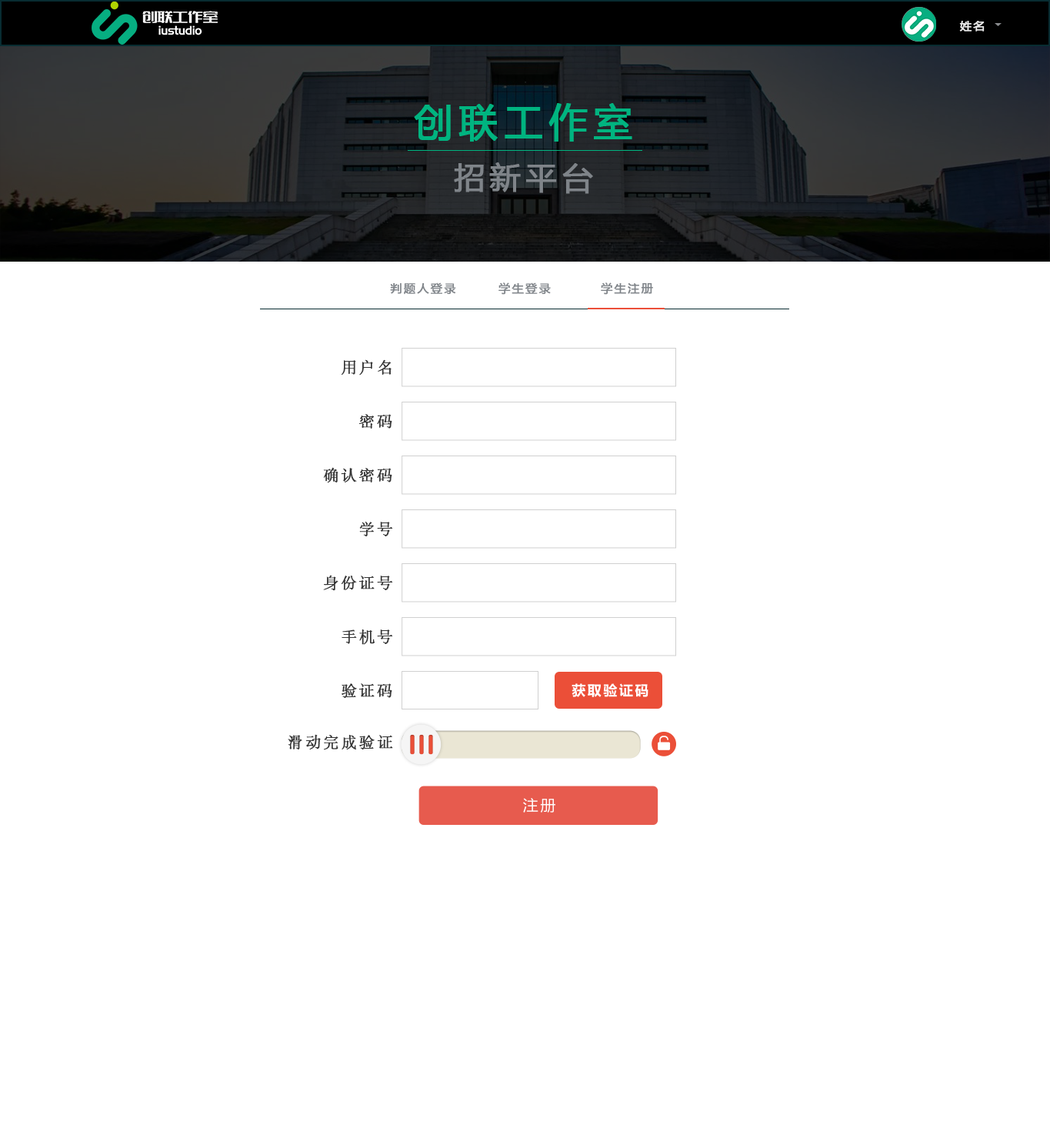
<style>
.page{position:relative;width:1050px;height:1135px;background:#ffffff}
.page>*{position:absolute;margin:0}
.t1{font:11.5px "MicrosoftYaHei";letter-spacing:0.14em;color:#eaeaea;font-weight:bold}
.t2{font:38.5px "MicrosoftYaHei";letter-spacing:0.14em;color:#00b480;font-weight:bold}
.t3{font:30.8px "MicrosoftYaHei";letter-spacing:0.14em;color:#7f8489;font-weight:bold}
.t4{font:11.5px "MicrosoftYaHei";letter-spacing:0.14em;color:#7f8489;font-weight:bold}
.t5{font:15.3px "AdobeSongStd-Light";letter-spacing:0.14em;color:#363636;font-weight:bold}
</style>
<div class="page">
<p class="t1" style="left:960px;top:21px;width:25px;height:11px">姓名</p>
<p class="t2" style="left:414px;top:103px;width:219px;height:39px">创联工作室</p>
<p class="t3" style="left:454px;top:162px;width:139px;height:32px">招新平台</p>
<p class="t4" style="left:390px;top:282px;width:66px;height:13px">判题人登录</p>
<p class="t4" style="left:499px;top:282px;width:52px;height:13px">学生登录</p>
<p class="t4" style="left:601px;top:282px;width:52px;height:13px">学生注册</p>
<p class="t5" style="left:342px;top:359px;width:50px;height:17px">用户名</p>
<p class="t5" style="left:359px;top:414px;width:33px;height:15px">密码</p>
<p class="t5" style="left:323px;top:467px;width:69px;height:16px">确认密码</p>
<p class="t5" style="left:359px;top:522px;width:34px;height:14px">学号</p>
<p class="t5" style="left:323px;top:575px;width:70px;height:16px">身份证号</p>
<p class="t5" style="left:342px;top:630px;width:51px;height:15px">手机号</p>
<p class="t5" style="left:342px;top:683px;width:50px;height:15px">验证码</p>
<p class="t5" style="left:288px;top:734px;width:105px;height:16px">滑动完成验证</p>
</div>
